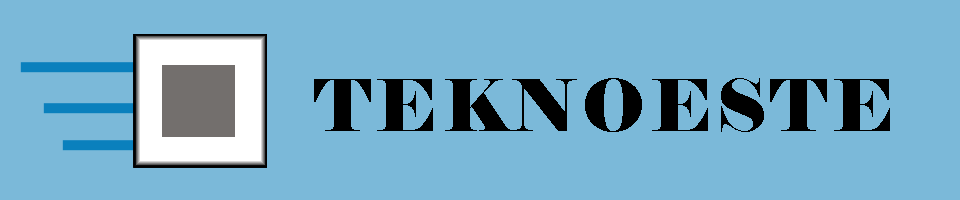
<style>
.page{position:relative;width:960px;height:200px;background:#7bb9d9}
.page>*{position:absolute;margin:0}
.t1{font:72px "Elephant-Regular";letter-spacing:0.05em;color:#000000}
</style>
<div class="page">
<p class="t1" style="left:314px;top:78px;width:576px;height:54px">TEKNOESTE</p>
</div>
